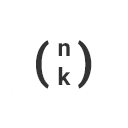
<style>
.page{position:relative;width:128px;height:128px;background:#ffffff}
.page>*{position:absolute;margin:0}
.t1{font:48px "Roboto-Bold";color:#333333}
.t2{font:24px "Roboto-Bold";color:#333333}
</style>
<div class="page">
<p class="t1" style="left:36px;top:40px;width:13px;height:49px">(</p>
<p class="t1" style="left:78px;top:40px;width:14px;height:49px">)</p>
<p class="t2" style="left:58px;top:43px;width:13px;height:42px;text-align:center">n<br>k</p>
</div>
